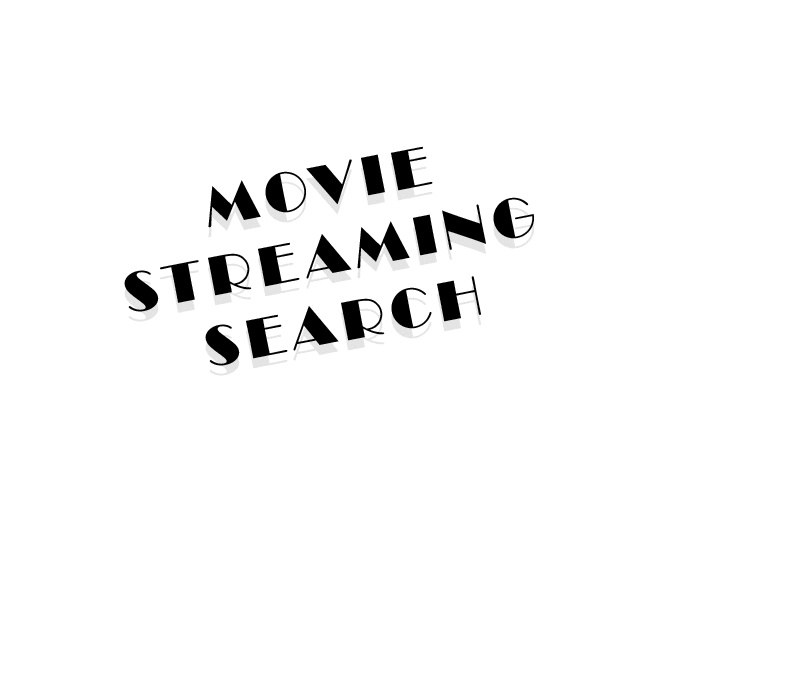
<style>
.page{position:relative;width:800px;height:697px;background:#ffffff}
.page>*{position:absolute;margin:0}
.t1{font:57.3px "Broadway";letter-spacing:0.12em;color:#000000;font-variant:small-caps}
</style>
<div class="page">
<p class="t1" style="left:124px;top:146px;width:410px;height:220px;text-align:center;rotate:-11deg">MOVIE<br>STREAMING<br>SEARCH</p>
</div>
